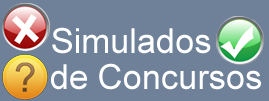
<style>
.page{position:relative;width:269px;height:101px;background:#6e8198}
.page>*{position:absolute;margin:0}
.t1{font:34.4px "ArialMT";color:#ffffff}
</style>
<div class="page">
<p class="t1" style="left:52px;top:27px;width:159px;height:27px">Simulados</p>
<p class="t1" style="left:51px;top:63px;width:210px;height:27px">de Concursos</p>
</div>
